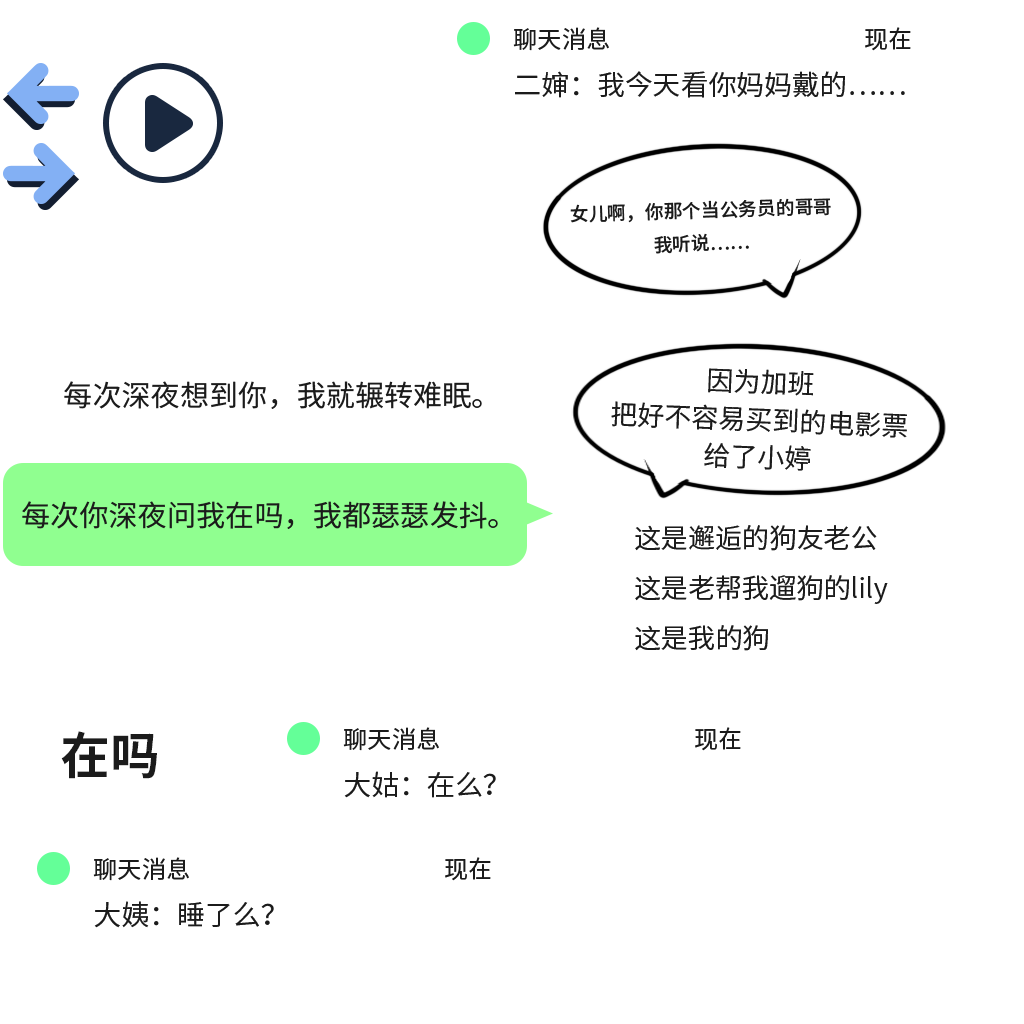
<style>
.page{position:relative;width:1024px;height:1024px;background:#ffffff}
.page>*{position:absolute;margin:0}
.t1{font:24.1px "SourceHanSansCN-Regular";color:#1b1b1b}
.t2{font:27.8px "SourceHanSansCN-Regular";color:#1b1b1b}
.t3{font:18.7px "SourceHanSansCN-Medium";color:#1b1b1b}
.t4{font:27.1px/37.5px "SourceHanSansCN-Regular";color:#1b1b1b}
.t5{font:29.2px "SourceHanSansCN-Regular";color:#1b1b1b}
.t6{font:27.1px "SourceHanSansCN-Regular";color:#1b1b1b}
.t7{font:50px "SourceHanSansCN-Bold";color:#1b1b1b}
</style>
<div class="page">
<p class="t1" style="left:513px;top:27px;width:398px;height:24px">聊天消息                                               现在</p>
<p class="t2" style="left:515px;top:71px;width:390px;height:27px">二婶：我今天看你妈妈戴的……</p>
<p class="t3" style="left:570px;top:198px;width:261px;height:56px;text-align:center;rotate:-2deg">女儿啊，你那个当公务员的哥哥<br>我听说……</p>
<p class="t4" style="left:611px;top:368px;width:296px;height:103px;text-align:center;rotate:2deg">因为加班<br>把好不容易买到的电影票<br>给了小婷</p>
<p class="t5" style="left:64px;top:381px;width:418px;height:28px">每次深夜想到你，我就辗转难眠。</p>
<p class="t5" style="left:22px;top:501px;width:476px;height:28px">每次你深夜问我在吗，我都瑟瑟发抖。</p>
<p class="t6" style="left:635px;top:525px;width:242px;height:26px">这是邂逅的狗友老公</p>
<p class="t6" style="left:635px;top:575px;width:253px;height:29px">这是老帮我遛狗的lily</p>
<p class="t6" style="left:635px;top:625px;width:133px;height:26px">这是我的狗</p>
<p class="t7" style="left:61px;top:731px;width:96px;height:48px">在吗</p>
<p class="t1" style="left:343px;top:727px;width:398px;height:24px">聊天消息                                               现在</p>
<p class="t2" style="left:344px;top:771px;width:152px;height:27px">大姑：在么？</p>
<p class="t1" style="left:93px;top:857px;width:398px;height:24px">聊天消息                                               现在</p>
<p class="t2" style="left:94px;top:901px;width:180px;height:27px">大姨：睡了么？</p>
</div>
